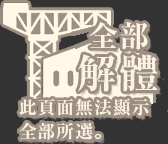
<style>
.page{position:relative;width:168px;height:144px;background:#333333}
.page>*{position:absolute;margin:0}
.t1{font:30px/32px "RyuminPr6N-ExBold";letter-spacing:0.05em;color:#fcf4e3}
.t2{font:40px/32px "RyuminPr6N-ExBold";letter-spacing:0.05em;color:#fcf4e3}
.t3{font:18px/24px "RyuminPr6N-ExBold";letter-spacing:0.05em;color:#fcf4e3}
</style>
<div class="page">
<p class="t1" style="left:78px;top:21px;width:80px;height:71px;text-align:center">全部<br><span class="t2">解體</span></p>
<p class="t3" style="left:19px;top:98px;width:130px;height:42px">此頁面無法顯示<br>全部所選。</p>
</div>
